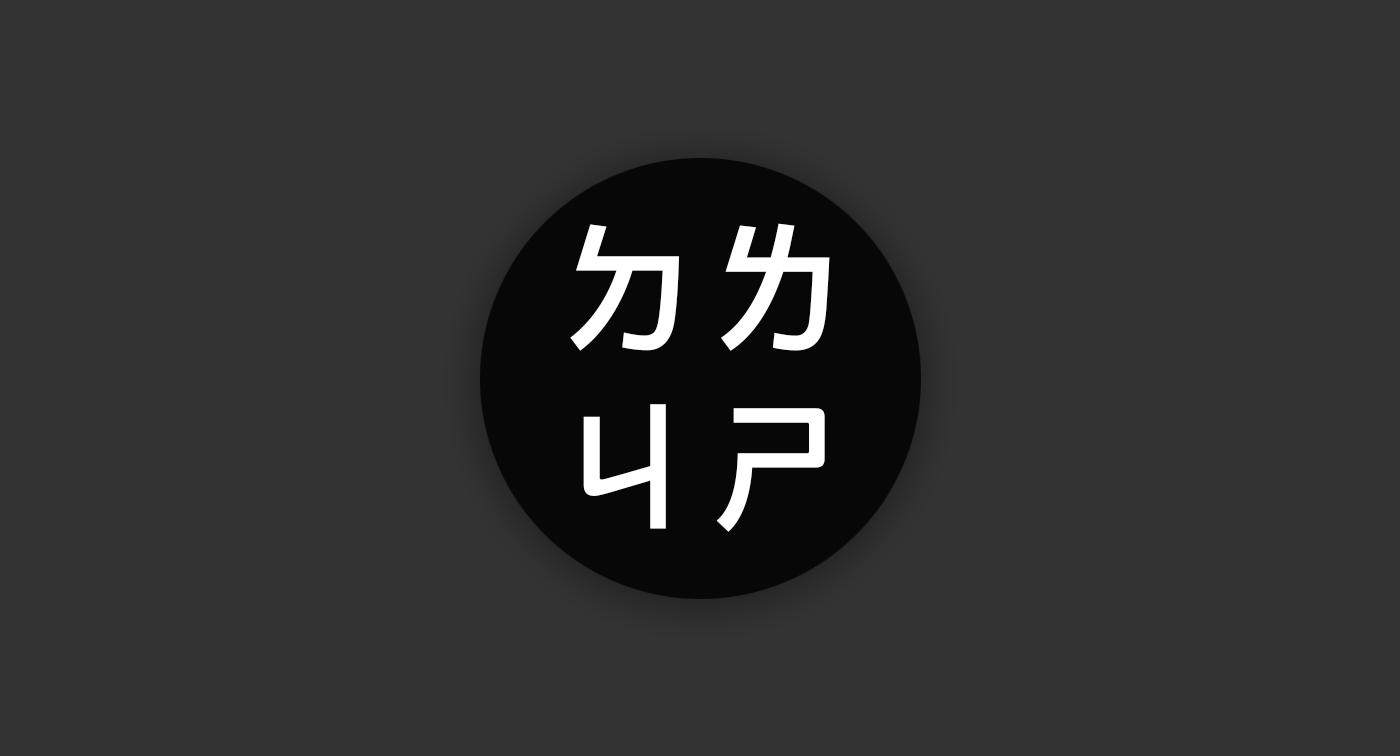
<style>
.page{position:relative;width:1400px;height:756px;background:#333333}
.page>*{position:absolute;margin:0}
.t1{font:149.5px/179.4px "PingFangTC-Semibold";color:#ffffff}
</style>
<div class="page">
<p class="t1" style="left:570px;top:223px;width:260px;height:309px">ㄉㄌ<br>ㄐㄕ</p>
</div>
